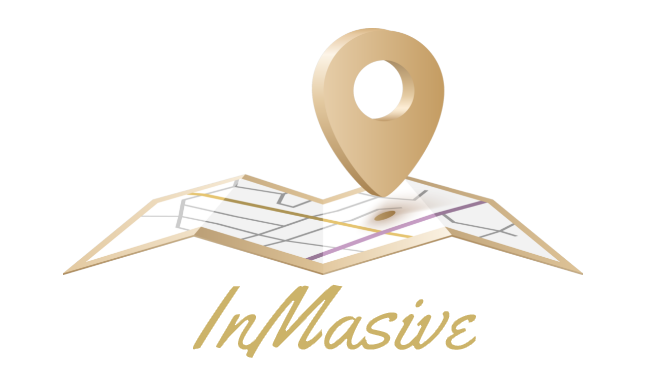
<style>
.page{position:relative;width:668px;height:386px;background:#ffffff}
.page>*{position:absolute;margin:0}
.t1{font:90px "Yellowtail";color:#ccb369}
</style>
<div class="page">
<p class="t1" style="left:192px;top:283px;width:285px;height:76px">InMasive</p>
</div>
